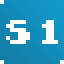
<style>
.page{position:relative;width:64px;height:64px}
.page>*{position:absolute;margin:0}
.t1{font:32px "Early-GameBoy";color:#ffffff}
</style>
<div class="page">
<p class="t1" style="left:6px;top:20px;width:52px;height:24px">S1</p>
</div>
